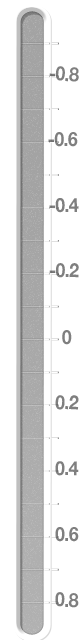
<style>
.page{position:relative;width:80px;height:640px;background:#ffffff}
.page>*{position:absolute;margin:0}
.t1{font:19.6px "HelveticaNeue-Bold";letter-spacing:-0.04em;color:#7f7f7f;scale:0.93 1}
</style>
<div class="page">
<p class="t1" style="left:49px;top:66px;width:30px;height:16px;rotate:3deg">-0.8</p>
<p class="t1" style="left:48px;top:132px;width:30px;height:15px">-0.6</p>
<p class="t1" style="left:49px;top:198px;width:30px;height:15px;rotate:-1deg">-0.4</p>
<p class="t1" style="left:49px;top:263px;width:30px;height:15px;rotate:1deg">-0.2</p>
<p class="t1" style="left:62px;top:330px;width:10px;height:15px">0</p>
<p class="t1" style="left:55px;top:395px;width:24px;height:15px;rotate:3deg">0.2</p>
<p class="t1" style="left:55px;top:461px;width:24px;height:15px;rotate:2deg">0.4</p>
<p class="t1" style="left:55px;top:527px;width:24px;height:15px">0.6</p>
<p class="t1" style="left:55px;top:592px;width:24px;height:16px;rotate:1deg">0.8</p>
</div>
